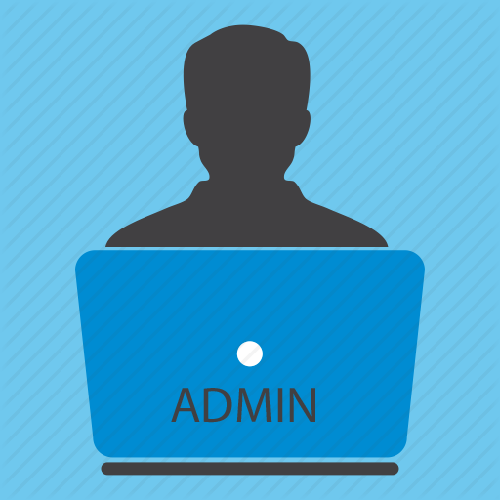
<style>
.page{position:relative;width:500px;height:500px;background:#6fc8ee}
.page>*{position:absolute;margin:0}
.t1{font:50px "MyriadPro-Regular";color:#414042}
</style>
<div class="page">
<p class="t1" style="left:171px;top:388px;width:144px;height:35px">ADMIN</p>
</div>
